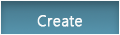
<style>
.page{position:relative;width:120px;height:35px}
.page>*{position:absolute;margin:0}
.t1{font:15px "WeblySleekUILight";letter-spacing:0.025em;color:#fafafa;font-weight:bold}
</style>
<div class="page">
<p class="t1" style="left:37px;top:15px;width:45px;height:12px">Create</p>
</div>
